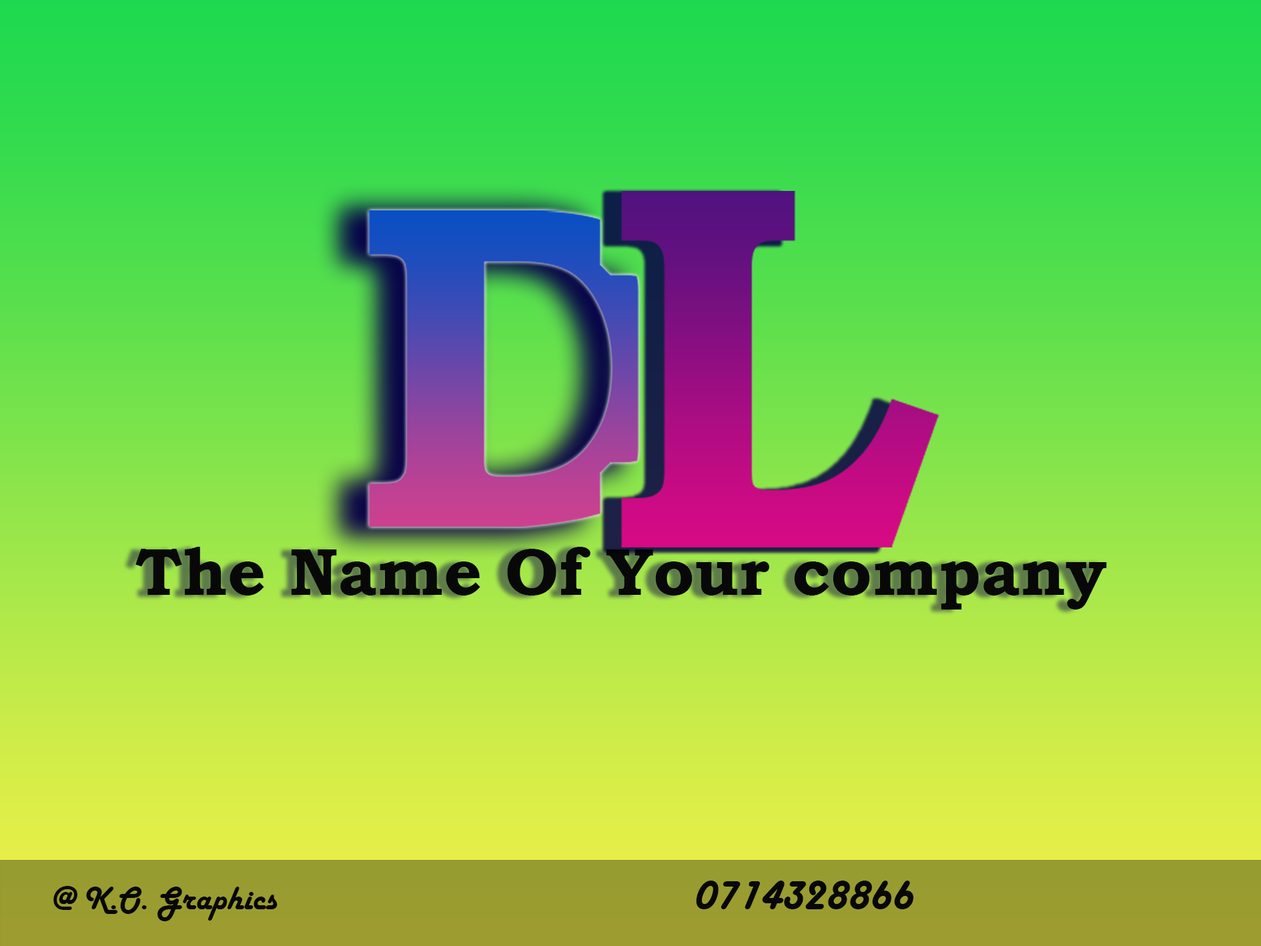
<style>
.page{position:relative;width:1261px;height:946px}
.page>*{position:absolute;margin:0}
.t1{font:66.7px "BookmanOldStyle-Bold";color:#080808}
.t2{font:46.9px "HarlowSolid";color:#080808}
.t3{font:33.7px "HarlowSolid";color:#080808}
</style>
<div class="page">
<p class="t1" style="left:135px;top:546px;width:972px;height:63px">The Name Of Your company</p>
<p class="t2" style="left:696px;top:880px;width:217px;height:29px">0714328866</p>
<p class="t3" style="left:53px;top:885px;width:225px;height:36px">@ K.O. Graphics</p>
</div>
